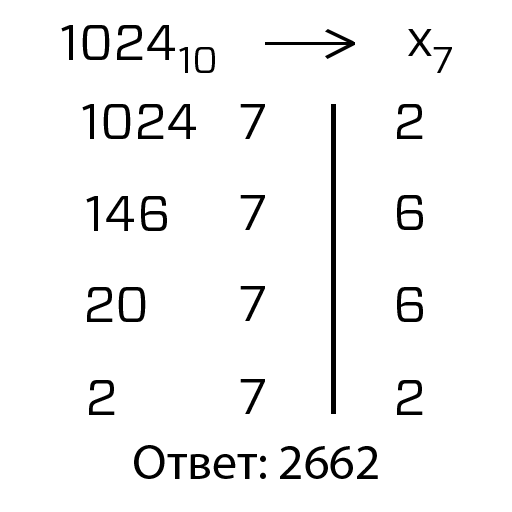
<style>
.page{position:relative;width:512px;height:512px;background:#ffffff}
.page>*{position:absolute;margin:0}
.t1{font:50px "Forza-Book";color:#000000}
.t2{font:37.5px "Forza-Book";color:#000000}
.t3{font:50px "MyriadPro-Regular";color:#000000}
</style>
<div class="page">
<p class="t1" style="left:61px;top:25px;width:114px;height:35px">1024</p>
<p class="t1" style="left:408px;top:29px;width:24px;height:27px">x</p>
<p class="t2" style="left:179px;top:47px;width:36px;height:26px">10</p>
<p class="t2" style="left:433px;top:47px;width:19px;height:26px">7</p>
<p class="t1" style="left:82px;top:104px;width:114px;height:35px">1024</p>
<p class="t1" style="left:240px;top:104px;width:25px;height:35px">7</p>
<p class="t1" style="left:397px;top:104px;width:26px;height:35px">2</p>
<p class="t1" style="left:86px;top:196px;width:81px;height:35px">146</p>
<p class="t1" style="left:240px;top:195px;width:25px;height:35px">7</p>
<p class="t1" style="left:397px;top:195px;width:26px;height:35px">6</p>
<p class="t1" style="left:87px;top:287px;width:59px;height:35px">20</p>
<p class="t1" style="left:240px;top:286px;width:25px;height:35px">7</p>
<p class="t1" style="left:397px;top:287px;width:26px;height:35px">6</p>
<p class="t1" style="left:89px;top:380px;width:26px;height:35px">2</p>
<p class="t1" style="left:240px;top:379px;width:25px;height:35px">7</p>
<p class="t1" style="left:397px;top:380px;width:26px;height:35px">2</p>
<p class="t3" style="left:134px;top:445px;width:244px;height:34px">Ответ: 2662</p>
</div>
